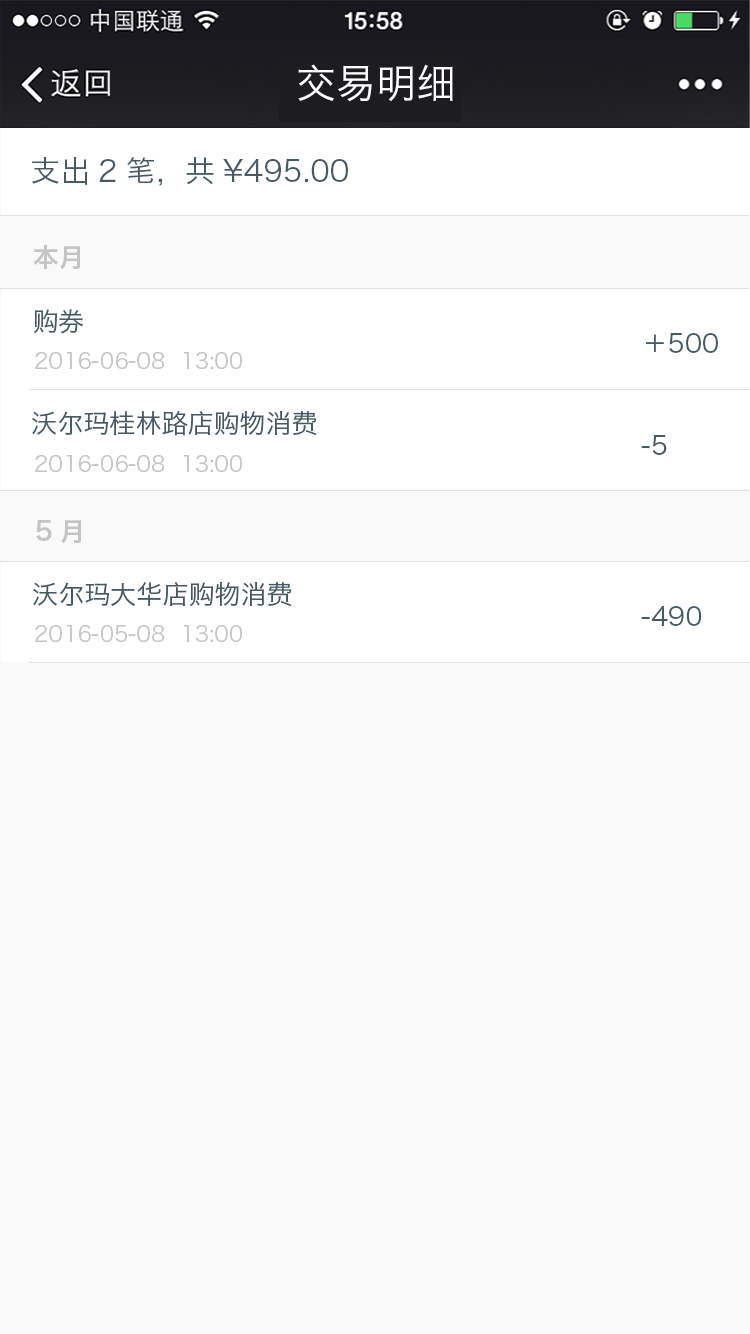
<style>
.page{position:relative;width:750px;height:1334px;background:#f9f9f9}
.page>*{position:absolute;margin:0}
.t1{font:40px "HiraginoSansGB-W3";color:#ffffff}
.t2{font:30px "HiraginoSansGB-W3";color:#455a64}
.t3{font:26px "HiraginoSansGB-W6";color:#c4c4c4}
.t4{font:26px "HiraginoSansGB-W3";color:#455a64}
.t5{font:22px "HiraginoSansGB-W3";color:#c4c4c4}
</style>
<div class="page">
<p class="t1" style="left:298px;top:64px;width:155px;height:38px">交易明细</p>
<p class="t2" style="left:32px;top:157px;width:316px;height:29px">支出2笔，共¥495.00</p>
<p class="t3" style="left:33px;top:245px;width:48px;height:25px">本月</p>
<p class="t4" style="left:33px;top:309px;width:51px;height:25px">购券</p>
<p class="t4" style="left:646px;top:333px;width:72px;height:20px">＋500</p>
<p class="t5" style="left:35px;top:352px;width:207px;height:17px">2016-06-08  13:00</p>
<p class="t4" style="left:32px;top:411px;width:285px;height:25px">沃尔玛桂林路店购物消费</p>
<p class="t4" style="left:641px;top:435px;width:26px;height:20px">-5</p>
<p class="t5" style="left:35px;top:455px;width:207px;height:17px">2016-06-08  13:00</p>
<p class="t3" style="left:36px;top:520px;width:46px;height:24px">5月</p>
<p class="t4" style="left:33px;top:582px;width:259px;height:25px">沃尔玛大华店购物消费</p>
<p class="t4" style="left:641px;top:606px;width:61px;height:20px">-490</p>
<p class="t5" style="left:35px;top:624px;width:207px;height:18px">2016-05-08  13:00</p>
</div>
